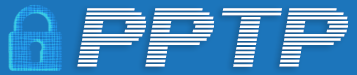
<style>
.page{position:relative;width:357px;height:75px;background:#1c75bb}
.page>*{position:absolute;margin:0}
.t1{font:92px "LinearBeam05";color:#ffffff;scale:1.07 1}
</style>
<div class="page">
<p class="t1" style="left:77px;top:8px;width:272px;height:59px">PPTP</p>
</div>
